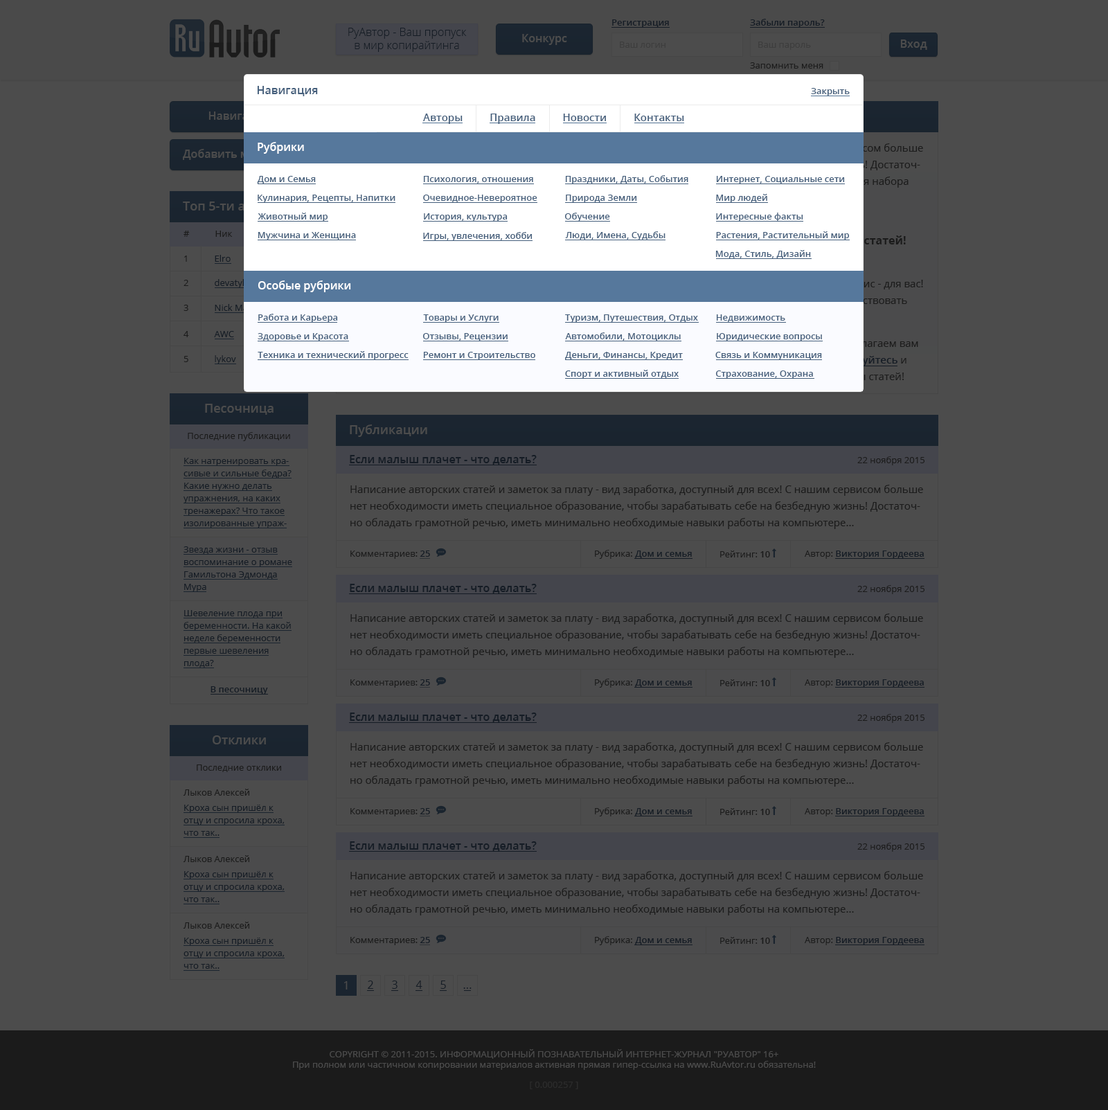
<style>
.page{position:relative;width:1108px;height:1110px;background:#4c4c4c}
.page>*{position:absolute;margin:0}
.t1{font:11.1px "OpenSans-Light";color:#151c25}
.t2{font:9px "OpenSans-Semibold";color:#151c25}
.t3{font:11.1px "OpenSans-Semibold";color:#4c4c4c}
.t4{font:9px "OpenSans";color:#3d3d3d}
.t5{font:9px "OpenSans";color:#1b1b1b}
.t6{font:11.1px "OpenSans-Semibold";color:#455f7c}
.t7{font:9px "OpenSans-Semibold";color:#455f7c}
.t8{font:10.4px "OpenSans-Semibold";color:#455f7c}
.t9{font:11.1px "OpenSans-Semibold";color:#ffffff}
.t10{font:9px "OpenSans";color:#151c25}
.t11{font:12.5px "OpenSans-Semibold";color:#4c4c4c}
.t12{font:9px/12.5px "OpenSans";color:#151c25}
.t13{font:11.1px "OpenSans-Semibold";color:#151c25}
.t14{font:10.4px/16.6px "OpenSans";color:#1b1b1b}
.t15{font:9px "OpenSans-Semibold";color:#1b1b1b}
.t16{font:11.1px "OpenSans";color:#4c4c4c}
.t17{font:11.1px "OpenSans";color:#151c25}
.t18{font:9px "OpenSans";color:#4c4c4c}
.t19{font:9px "OpenSans";color:#2c2c2c}
</style>
<div class="page">
<p class="t1" style="left:348px;top:28px;width:119px;height:24px;text-align:center">РуАвтор - Ваш пропуск<br>в мир копирайтинга</p>
<p class="t2" style="left:612px;top:19px;width:57px;height:9px">Регистрация</p>
<p class="t2" style="left:750px;top:19px;width:75px;height:9px">Забыли пароль?</p>
<p class="t3" style="left:522px;top:34px;width:45px;height:11px">Конкурс</p>
<p class="t4" style="left:620px;top:42px;width:45px;height:6px">Ваш логин</p>
<p class="t4" style="left:758px;top:42px;width:53px;height:8px">Ваш пароль</p>
<p class="t3" style="left:900px;top:39px;width:27px;height:11px">Вход</p>
<p class="t5" style="left:750px;top:62px;width:73px;height:7px">Запомнить меня</p>
<p class="t6" style="left:257px;top:86px;width:61px;height:10px">Навигация</p>
<p class="t7" style="left:811px;top:88px;width:38px;height:8px">Закрыть</p>
<p class="t8" style="left:423px;top:114px;width:261px;height:10px">Авторы          Правила          Новости          Контакты</p>
<p class="t9" style="left:258px;top:142px;width:46px;height:12px">Рубрики</p>
<p class="t7" style="left:257px;top:176px;width:59px;height:7px">Дом и Семья</p>
<p class="t7" style="left:423px;top:176px;width:110px;height:7px">Психология, отношения</p>
<p class="t7" style="left:565px;top:175px;width:123px;height:9px">Праздники, Даты, События</p>
<p class="t7" style="left:716px;top:176px;width:129px;height:8px">Интернет, Социальные сети</p>
<p class="t7" style="left:258px;top:195px;width:137px;height:8px">Кулинария, Рецепты, Напитки</p>
<p class="t7" style="left:423px;top:195px;width:114px;height:8px">Очевидное-Невероятное</p>
<p class="t7" style="left:566px;top:195px;width:71px;height:8px">Природа Земли</p>
<p class="t7" style="left:716px;top:194px;width:51px;height:9px">Мир людей</p>
<p class="t7" style="left:258px;top:213px;width:70px;height:9px">Животный мир</p>
<p class="t7" style="left:424px;top:213px;width:83px;height:9px">История, культура</p>
<p class="t7" style="left:564px;top:213px;width:46px;height:9px">Обучение</p>
<p class="t7" style="left:716px;top:213px;width:87px;height:9px">Интересные факты</p>
<p class="t5" style="left:183px;top:231px;width:50px;height:6px">#           Ник</p>
<p class="t7" style="left:258px;top:232px;width:98px;height:8px">Мужчина и Женщина</p>
<p class="t7" style="left:423px;top:232px;width:109px;height:9px">Игры, увлечения, хобби</p>
<p class="t7" style="left:565px;top:231px;width:100px;height:9px">Люди, Имена, Судьбы</p>
<p class="t7" style="left:716px;top:231px;width:133px;height:9px">Растения, Растительный мир</p>
<p class="t10" style="left:184px;top:255px;width:47px;height:7px">1           Elro</p>
<p class="t7" style="left:715px;top:250px;width:96px;height:8px">Мода, Стиль, Дизайн</p>
<p class="t10" style="left:183px;top:279px;width:64px;height:9px">2           devatyh</p>
<p class="t9" style="left:258px;top:280px;width:93px;height:12px">Особые рубрики</p>
<p class="t7" style="left:258px;top:314px;width:80px;height:9px">Работа и Карьера</p>
<p class="t7" style="left:423px;top:314px;width:75px;height:9px">Товары и Услуги</p>
<p class="t7" style="left:565px;top:314px;width:133px;height:9px">Туризм, Путешествия, Отдых</p>
<p class="t7" style="left:716px;top:314px;width:69px;height:8px">Недвижимость</p>
<p class="t10" style="left:183px;top:331px;width:51px;height:6px">4           AWC</p>
<p class="t7" style="left:258px;top:333px;width:90px;height:8px">Здоровье и Красота</p>
<p class="t7" style="left:422px;top:333px;width:85px;height:8px">Отзывы, Рецензии</p>
<p class="t7" style="left:565px;top:332px;width:116px;height:9px">Автомобили, Мотоциклы</p>
<p class="t7" style="left:717px;top:333px;width:105px;height:8px">Юридические вопросы</p>
<p class="t7" style="left:258px;top:351px;width:150px;height:9px">Техника и технический прогресс</p>
<p class="t7" style="left:423px;top:352px;width:112px;height:8px">Ремонт и Строительство</p>
<p class="t7" style="left:565px;top:352px;width:118px;height:8px">Деньги, Финансы, Кредит</p>
<p class="t7" style="left:715px;top:352px;width:107px;height:8px">Связь и Коммуникация</p>
<p class="t10" style="left:183px;top:355px;width:53px;height:9px">5           lykov</p>
<p class="t7" style="left:565px;top:370px;width:113px;height:9px">Спорт и активный отдых</p>
<p class="t7" style="left:715px;top:370px;width:98px;height:9px">Страхование, Охрана</p>
<p class="t11" style="left:205px;top:404px;width:68px;height:11px">Песочница</p>
<p class="t11" style="left:350px;top:424px;width:77px;height:13px">Публикации</p>
<p class="t5" style="left:188px;top:432px;width:102px;height:9px">Последние публикации</p>
<p class="t12" style="left:183px;top:458px;width:108px;height:70px">Как натренировать красивые и сильные бедра? Какие нужно делать упражнения, на каких тренажерах? Что такое изолированные упражнения и для чего они нужны?</p>
<p class="t13" style="left:350px;top:455px;width:187px;height:10px">Если малыш плачет - что делать?</p>
<p class="t5" style="left:857px;top:456px;width:67px;height:9px">22 ноября 2015</p>
<p class="t14" style="left:350px;top:485px;width:573px;height:44px">Написание авторских статей и заметок за плату - вид заработка, доступный для всех! С нашим сервисом больше нет необходимости иметь специальное образование, чтобы зарабатывать себе на безбедную жизнь! Достаточно обладать грамотной речью, иметь минимально необходимые навыки работы на компьютере...</p>
<p class="t12" style="left:183px;top:546px;width:109px;height:46px">Звезда жизни - отзыв воспоминание о романе Гамильтона Эдмонда Мура</p>
<p class="t5" style="left:350px;top:550px;width:80px;height:9px">Комментариев: <span class="t15">25</span></p>
<p class="t2" style="left:595px;top:550px;width:97px;height:9px"><span class="t10">Рубрика: </span>Дом и семья</p>
<p class="t5" style="left:720px;top:550px;width:50px;height:7px">Рейтинг: <span class="t15">10</span></p>
<p class="t2" style="left:804px;top:550px;width:120px;height:9px"><span class="t10">Автор: </span>Виктория Гордеева</p>
<p class="t13" style="left:350px;top:584px;width:187px;height:10px">Если малыш плачет - что делать?</p>
<p class="t5" style="left:857px;top:585px;width:67px;height:9px">22 ноября 2015</p>
<p class="t12" style="left:183px;top:610px;width:108px;height:57px">Шевеление плода при беременности. На какой неделе беременности первые шевеления плода?</p>
<p class="t14" style="left:350px;top:613px;width:573px;height:45px">Написание авторских статей и заметок за плату - вид заработка, доступный для всех! С нашим сервисом больше нет необходимости иметь специальное образование, чтобы зарабатывать себе на безбедную жизнь! Достаточно обладать грамотной речью, иметь минимально необходимые навыки работы на компьютере...</p>
<p class="t2" style="left:210px;top:686px;width:58px;height:8px">В песочницу</p>
<p class="t5" style="left:350px;top:679px;width:80px;height:8px">Комментариев: <span class="t15">25</span></p>
<p class="t2" style="left:595px;top:678px;width:97px;height:9px"><span class="t10">Рубрика: </span>Дом и семья</p>
<p class="t5" style="left:720px;top:679px;width:50px;height:7px">Рейтинг: <span class="t15">10</span></p>
<p class="t2" style="left:804px;top:679px;width:120px;height:8px"><span class="t10">Автор: </span>Виктория Гордеева</p>
<p class="t13" style="left:350px;top:712px;width:187px;height:11px">Если малыш плачет - что делать?</p>
<p class="t5" style="left:857px;top:714px;width:67px;height:9px">22 ноября 2015</p>
<p class="t11" style="left:213px;top:735px;width:53px;height:9px">Отклики</p>
<p class="t14" style="left:350px;top:742px;width:573px;height:44px">Написание авторских статей и заметок за плату - вид заработка, доступный для всех! С нашим сервисом больше нет необходимости иметь специальное образование, чтобы зарабатывать себе на безбедную жизнь! Достаточно обладать грамотной речью, иметь минимально необходимые навыки работы на компьютере...</p>
<p class="t5" style="left:197px;top:764px;width:84px;height:8px">Последние отклики</p>
<p class="t5" style="left:183px;top:789px;width:66px;height:6px">Лыков Алексей</p>
<p class="t12" style="left:183px;top:804px;width:102px;height:32px">Кроха сын пришёл к отцу и спросила кроха, что так..</p>
<p class="t5" style="left:350px;top:808px;width:80px;height:8px">Комментариев: <span class="t15">25</span></p>
<p class="t2" style="left:595px;top:807px;width:97px;height:9px"><span class="t10">Рубрика: </span>Дом и семья</p>
<p class="t5" style="left:720px;top:808px;width:50px;height:7px">Рейтинг: <span class="t15">10</span></p>
<p class="t2" style="left:804px;top:808px;width:120px;height:8px"><span class="t10">Автор: </span>Виктория Гордеева</p>
<p class="t13" style="left:350px;top:841px;width:187px;height:11px">Если малыш плачет - что делать?</p>
<p class="t5" style="left:857px;top:843px;width:67px;height:9px">22 ноября 2015</p>
<p class="t5" style="left:183px;top:855px;width:66px;height:7px">Лыков Алексей</p>
<p class="t12" style="left:183px;top:871px;width:102px;height:31px">Кроха сын пришёл к отцу и спросила кроха, что так..</p>
<p class="t14" style="left:350px;top:871px;width:573px;height:44px">Написание авторских статей и заметок за плату - вид заработка, доступный для всех! С нашим сервисом больше нет необходимости иметь специальное образование, чтобы зарабатывать себе на безбедную жизнь! Достаточно обладать грамотной речью, иметь минимально необходимые навыки работы на компьютере...</p>
<p class="t5" style="left:183px;top:921px;width:66px;height:7px">Лыков Алексей</p>
<p class="t12" style="left:183px;top:937px;width:102px;height:32px">Кроха сын пришёл к отцу и спросила кроха, что так..</p>
<p class="t5" style="left:350px;top:937px;width:80px;height:8px">Комментариев: <span class="t15">25</span></p>
<p class="t2" style="left:595px;top:936px;width:97px;height:9px"><span class="t10">Рубрика: </span>Дом и семья</p>
<p class="t5" style="left:720px;top:937px;width:50px;height:7px">Рейтинг: <span class="t15">10</span></p>
<p class="t2" style="left:804px;top:937px;width:120px;height:8px"><span class="t10">Автор: </span>Виктория Гордеева</p>
<p class="t16" style="left:344px;top:981px;width:4px;height:8px">1</p>
<p class="t17" style="left:368px;top:980px;width:5px;height:9px">2</p>
<p class="t17" style="left:392px;top:980px;width:5px;height:9px">3</p>
<p class="t17" style="left:415px;top:980px;width:7px;height:9px">4</p>
<p class="t17" style="left:440px;top:980px;width:6px;height:9px">5</p>
<p class="t17" style="left:463px;top:987px;width:8px;height:2px">...</p>
<p class="t18" style="left:293px;top:1049px;width:523px;height:21px;text-align:center">COPYRIGHT © 2011-2015. ИНФОРМАЦИОННЫЙ ПОЗНАВАТЕЛЬНЫЙ ИНТЕРНЕТ-ЖУРНАЛ "РУАВТОР" 16+<br>При полном или частичном копировании материалов активная прямая гипер-ссылка на www.RuAvtor.ru обязательна!</p>
<p class="t19" style="left:530px;top:1081px;width:48px;height:8px">[ 0.000257 ]</p>
</div>
